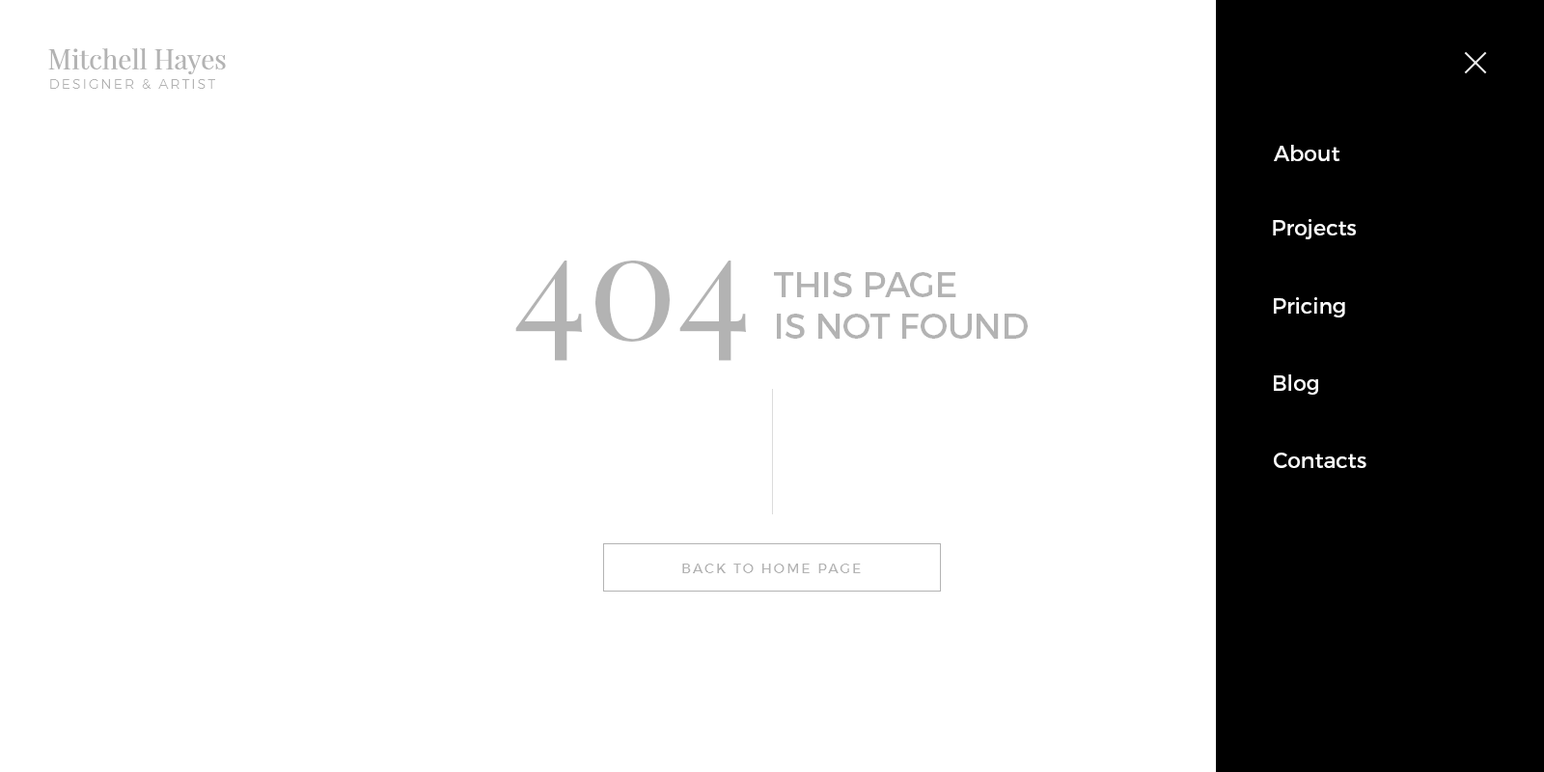
<style>
.page{position:relative;width:1544px;height:772px;background:#ffffff}
.page>*{position:absolute;margin:0}
.t1{font:27px "PlayfairDisplay-Regular";color:#b3b3b3}
.t2{font:13.5px "Montserrat-Light";letter-spacing:0.15em;color:#b3b3b3}
.t3{font:21.2px "Montserrat-Regular";color:#fefefe}
.t4{font:149.6px "PlayfairDisplay-Regular";color:#b3b3b3}
.t5{font:34.7px "Montserrat-Regular";color:#b3b3b3}
.t6{font:13.5px "Montserrat-Regular";letter-spacing:0.15em;color:#b3b3b3}
</style>
<div class="page">
<p class="t1" style="left:48px;top:48px;width:178px;height:26px">Mitchell Hayes</p>
<p class="t2" style="left:50px;top:79px;width:165px;height:10px">DESIGNER &amp; ARTIST</p>
<p class="t3" style="left:1274px;top:145px;width:67px;height:16px">About</p>
<p class="t3" style="left:1273px;top:219px;width:83px;height:20px">Projects</p>
<p class="t4" style="left:515px;top:261px;width:231px;height:100px">404</p>
<p class="t5" style="left:774px;top:272px;width:254px;height:67px">THIS PAGE<br>IS NOT FOUND</p>
<p class="t3" style="left:1274px;top:297px;width:71px;height:21px">Pricing</p>
<p class="t3" style="left:1274px;top:374px;width:44px;height:21px">Blog</p>
<p class="t3" style="left:1274px;top:453px;width:93px;height:15px">Contacts</p>
<p class="t6" style="left:682px;top:564px;width:179px;height:9px">BACK TO HOME PAGE</p>
</div>
